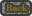
<style>
.page{position:relative;width:32px;height:16px;background:#3b3b3b}
.page>*{position:absolute;margin:0}
.t1{font:9px "Georgia-Bold";letter-spacing:-0.04em;color:#887616}
</style>
<div class="page">
<p class="t1" style="left:6px;top:4px;width:22px;height:7px">Back</p>
</div>
